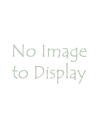
<style>
.page{position:relative;width:100px;height:129px;background:#ffffff}
.page>*{position:absolute;margin:0}
.t1{font:18px "TempusSansITC";color:#bdcebd}
</style>
<div class="page">
<p class="t1" style="left:11px;top:44px;width:76px;height:40px;text-align:center">No Image to Display</p>
</div>
